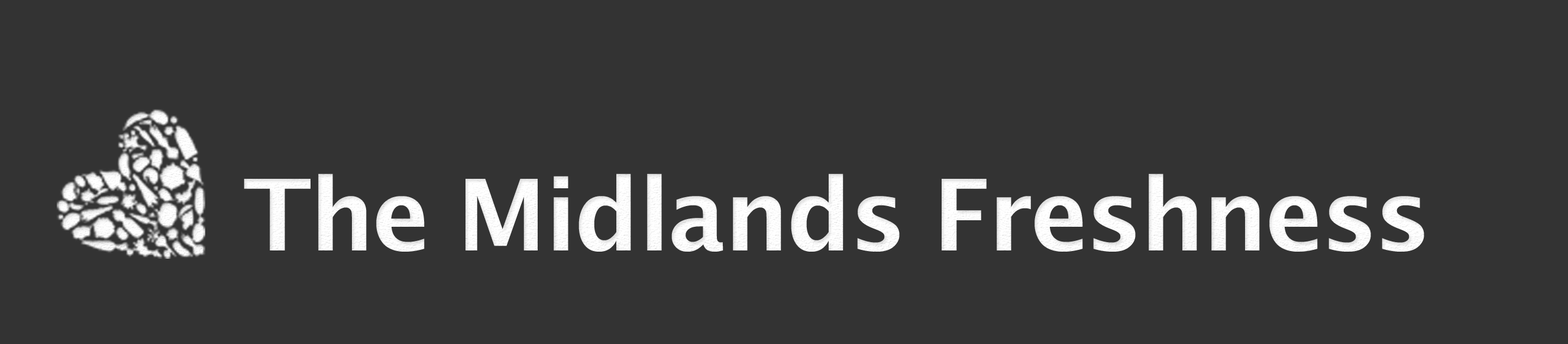
<style>
.page{position:relative;width:1568px;height:344px;background:#333333}
.page>*{position:absolute;margin:0}
.t1{font:99.1px "LucidaSans-Demi";letter-spacing:-0.025em;color:#ffffff}
</style>
<div class="page">
<p class="t1" style="left:244px;top:173px;width:1180px;height:78px">The Midlands Freshness</p>
</div>
